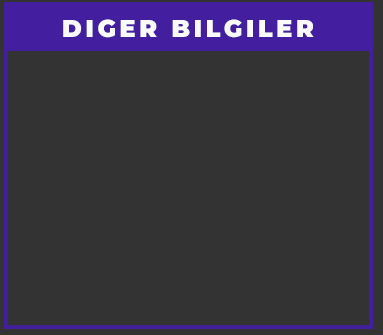
<style>
.page{position:relative;width:383px;height:335px;background:#333333}
.page>*{position:absolute;margin:0}
.t1{font:24px "Montserrat-Black";letter-spacing:0.15em;color:#fafafa;text-transform:uppercase}
</style>
<div class="page">
<p class="t1" style="left:63px;top:19px;width:251px;height:19px">DIGER BILGILER</p>
</div>
